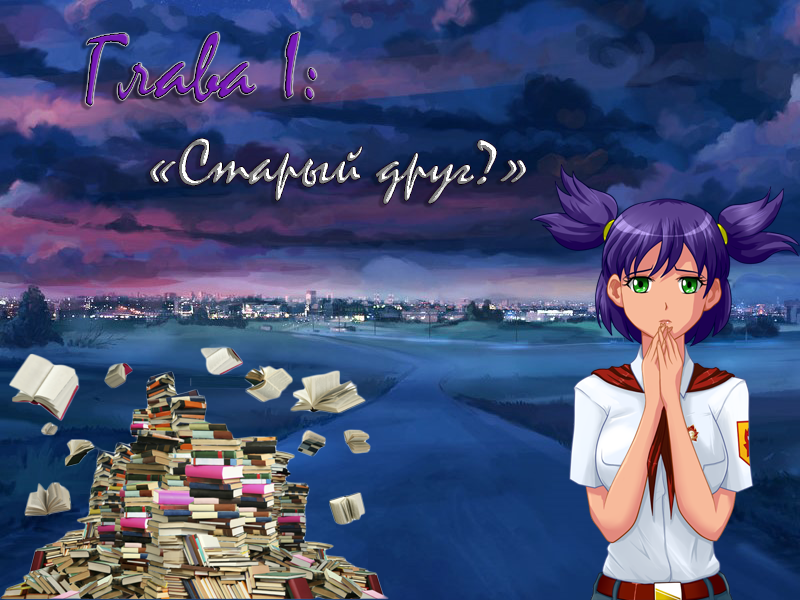
<style>
.page{position:relative;width:800px;height:600px}
.page>*{position:absolute;margin:0}
.t1{font:96px "Mistral"}
.t2{font:66.7px "Mistral"}
</style>
<div class="page">
<p class="t1" style="left:85px;top:32px;width:232px;height:74px">Глава I:</p>
<p class="t2" style="left:150px;top:138px;width:376px;height:66px">«Старый друг?»</p>
</div>
